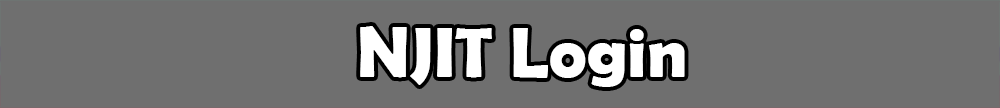
<style>
.page{position:relative;width:1000px;height:108px;background:#6f6f6f}
.page>*{position:absolute;margin:0}
.t1{font:71px "BerlinSansFBDemi-Bold";color:#ffffff}
</style>
<div class="page">
<p class="t1" style="left:360px;top:26px;width:325px;height:61px">NJIT Login</p>
</div>
